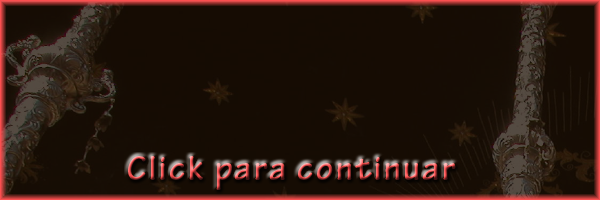
<style>
.page{position:relative;width:600px;height:200px;background:#160c03}
.page>*{position:absolute;margin:0}
.t1{font:36px "TektonPro-Bold";letter-spacing:0.06em}
</style>
<div class="page">
<p class="t1" style="left:128px;top:156px;width:328px;height:34px">Click para continuar</p>
</div>
